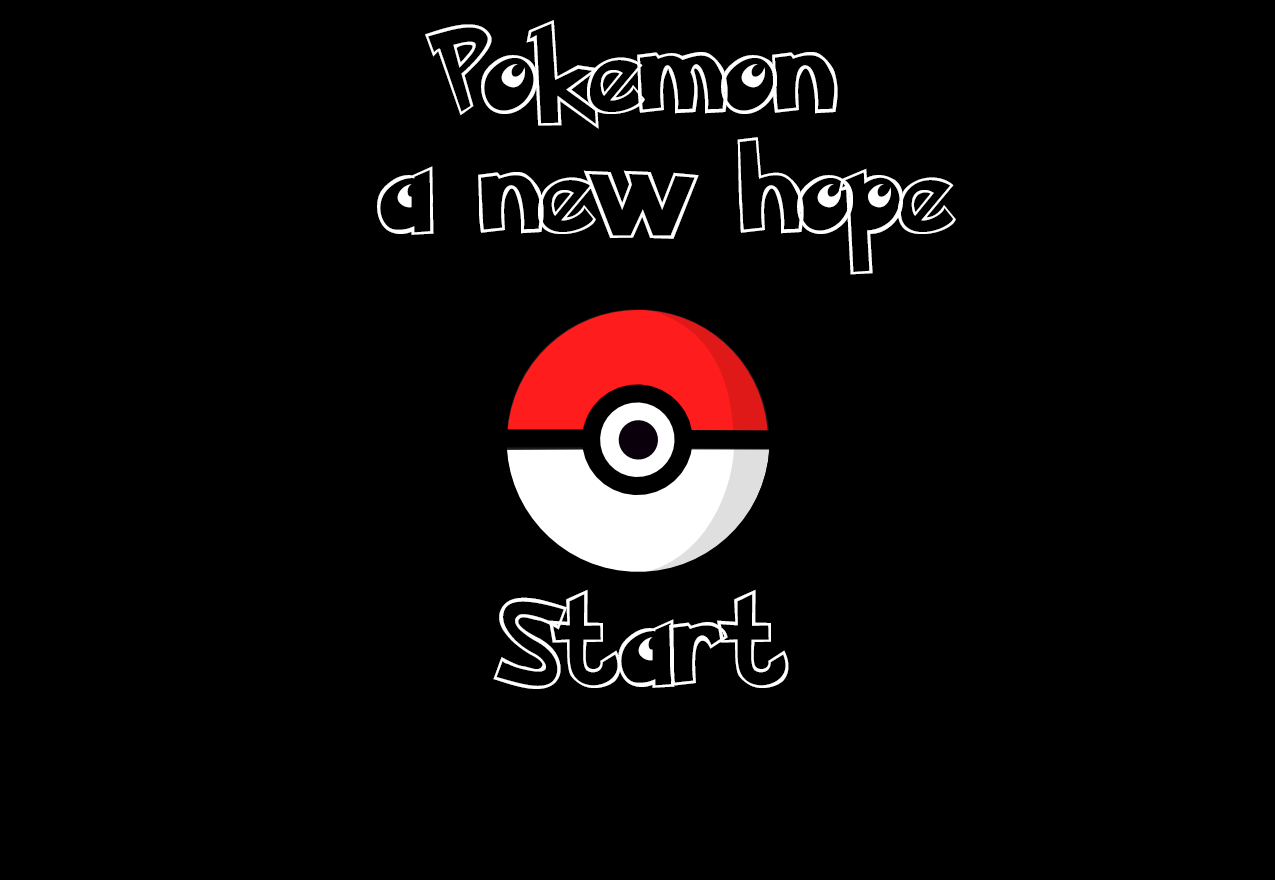
<style>
.page{position:relative;width:1275px;height:880px;background:#000000}
.page>*{position:absolute;margin:0}
.t1{font:100px "PokemonHollowNormal";color:#ffffff}
</style>
<div class="page">
<p class="t1" style="left:377px;top:20px;width:579px;height:255px">Pokemon<br> a new hope</p>
<p class="t1" style="left:493px;top:589px;width:296px;height:100px">Start</p>
</div>
